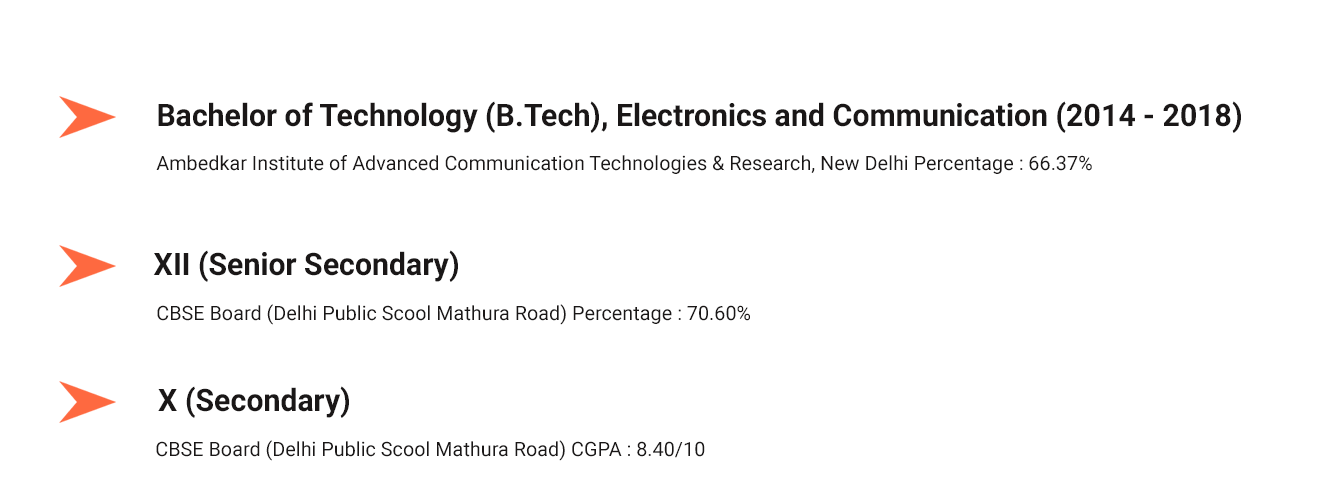
<style>
.page{position:relative;width:1329px;height:487px;background:#ffffff}
.page>*{position:absolute;margin:0}
.t1{font:31.1px "Roboto-Bold";color:#1a1717}
.t2{font:19.8px "Roboto-Regular";color:#1a1717}
</style>
<div class="page">
<p class="t1" style="left:158px;top:101px;width:1083px;height:32px">Bachelor of Technology (B.Tech), Electronics and Communication (2014 - 2018)</p>
<p class="t2" style="left:156px;top:155px;width:936px;height:19px">Ambedkar Institute of Advanced Communication Technologies &amp; Research, New Delhi Percentage : 66.37%</p>
<p class="t1" style="left:153px;top:250px;width:305px;height:32px">XII (Senior Secondary)</p>
<p class="t2" style="left:157px;top:304px;width:593px;height:21px">CBSE Board (Delhi Public Scool Mathura Road) Percentage : 70.60%</p>
<p class="t1" style="left:158px;top:386px;width:191px;height:32px">X (Secondary)</p>
<p class="t2" style="left:156px;top:440px;width:549px;height:21px">CBSE Board (Delhi Public Scool Mathura Road) CGPA : 8.40/10</p>
</div>
